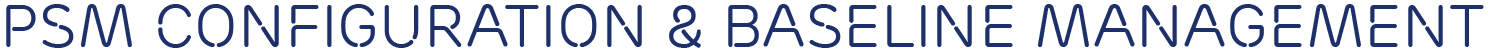
<style>
.page{position:relative;width:1488px;height:52px;background:#ffffff}
.page>*{position:absolute;margin:0}
.t1{font:60px "EricssonCapitalTT-Regular";color:#1d306a}
</style>
<div class="page">
<p class="t1" style="left:6px;top:4px;width:1478px;height:44px">PSM CONFIGURATION &amp; BASELINE MANAGEMENT</p>
</div>
